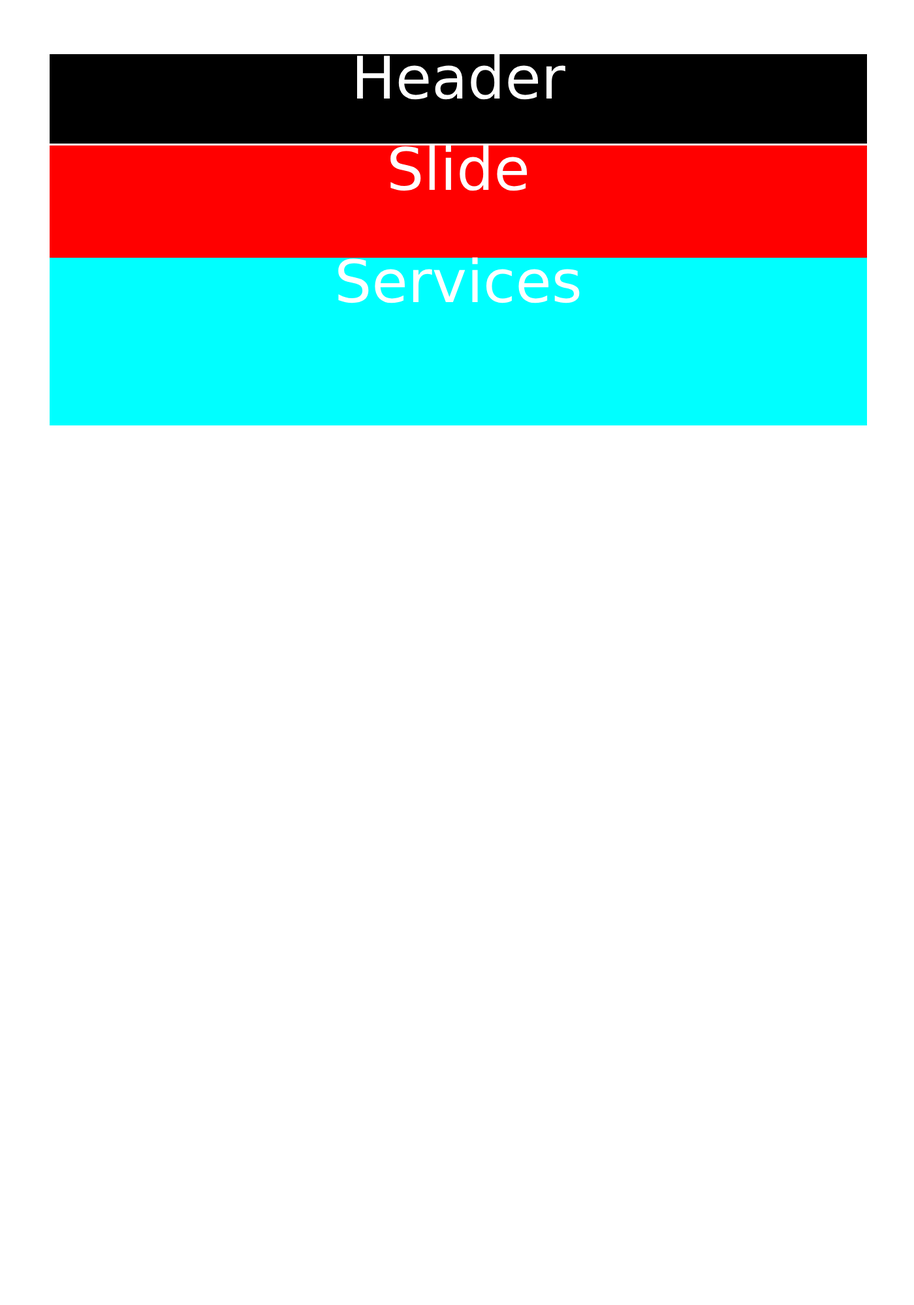
<style>
.page{position:relative;width:914px;height:1305px;background:#ffffff}
.page>*{position:absolute;margin:0}
.t1{font:58.7px "DejaVuSans";color:#ffffff}
</style>
<div class="page">
<p class="t1" style="left:356px;top:54px;width:209px;height:46px">Header</p>
<p class="t1" style="left:390px;top:145px;width:137px;height:46px">Slide</p>
<p class="t1" style="left:338px;top:257px;width:241px;height:46px">Services</p>
</div>
